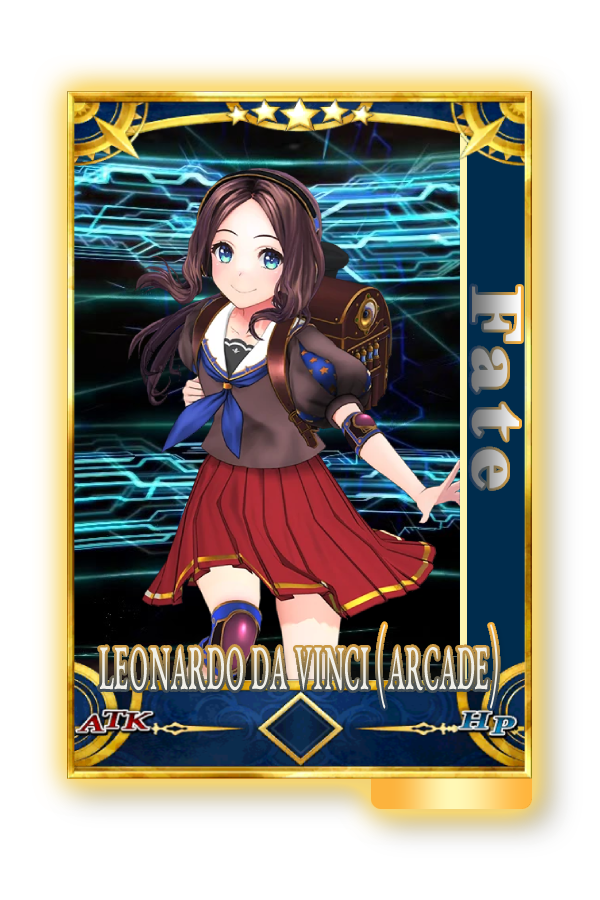
<style>
.page{position:relative;width:600px;height:900px;background:#ffffff}
.page>*{position:absolute;margin:0}
.t1{font:92px "EBGaramond12-AllSC";color:#f0efe8;scale:0.37 1}
</style>
<div class="page">
<p class="t1" style="left:99px;top:624px;width:399px;height:85px">leonardo da vinci (arcade)</p>
</div>
